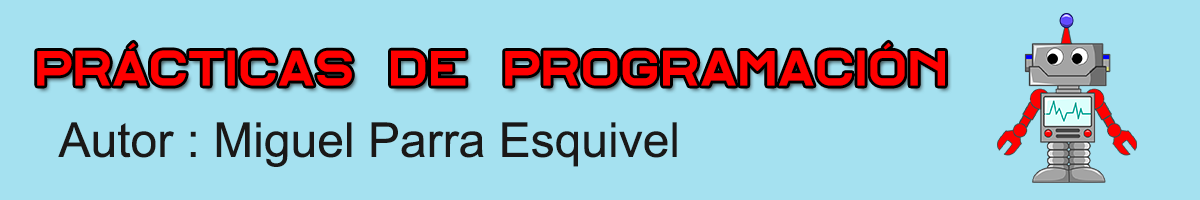
<style>
.page{position:relative;width:1200px;height:200px;background:#a5e1f0}
.page>*{position:absolute;margin:0}
.t1{font:48.3px "Alfphabet-IV";color:#ff0000}
.t2{font:48px "ArialMT";color:#1a1817}
</style>
<div class="page">
<p class="t1" style="left:37px;top:42px;width:908px;height:44px">Prácticas DE Programación</p>
<p class="t2" style="left:58px;top:122px;width:619px;height:45px">Autor : Miguel Parra Esquivel</p>
</div>
